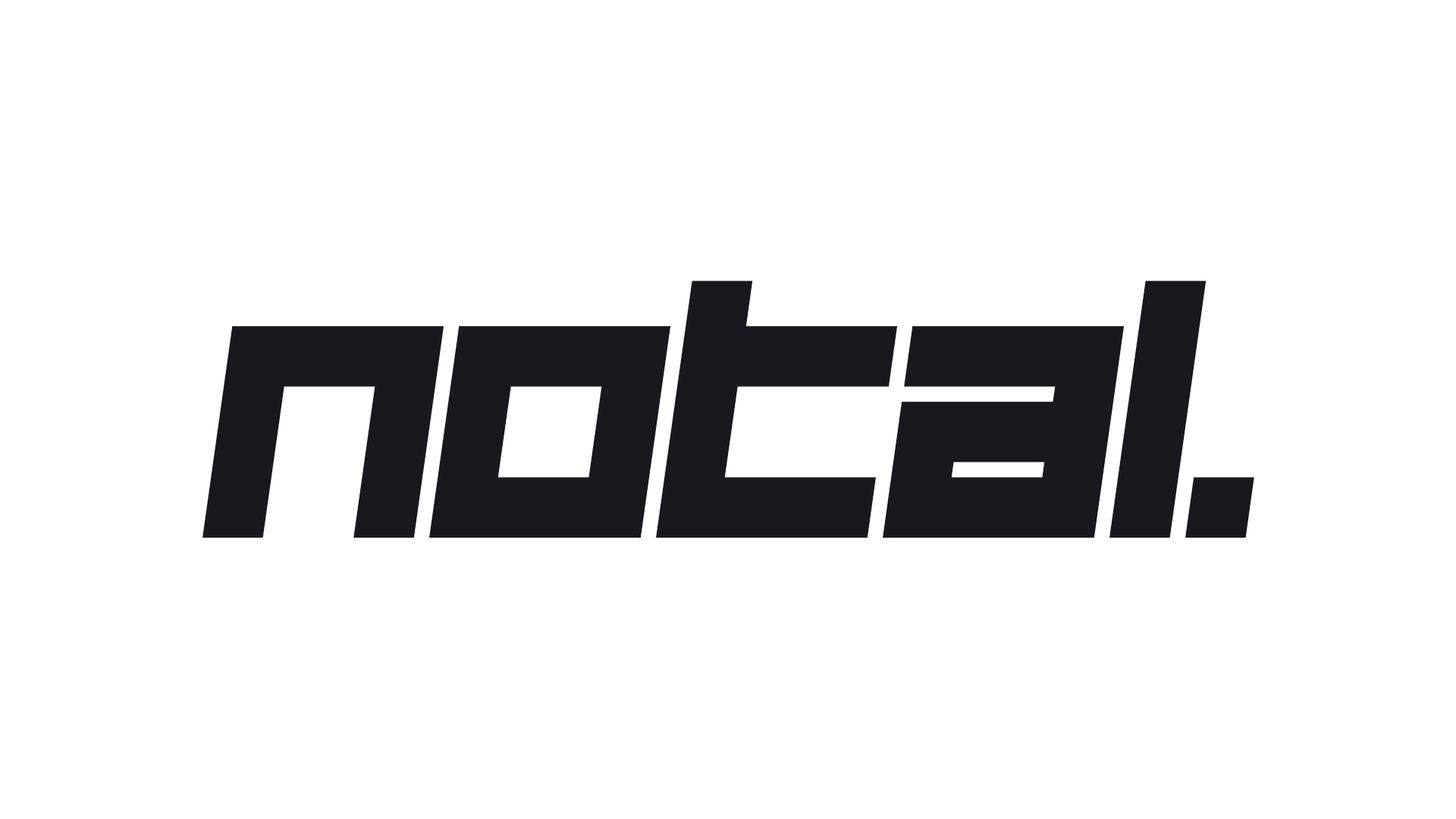
<style>
.page{position:relative;width:1456px;height:819px;background:#ffffff}
.page>*{position:absolute;margin:0}
.t1{font:309.7px "CorporationGames";color:#19181e}
</style>
<div class="page">
<p class="t1" style="left:202px;top:281px;width:1052px;height:257px">notal.</p>
</div>
